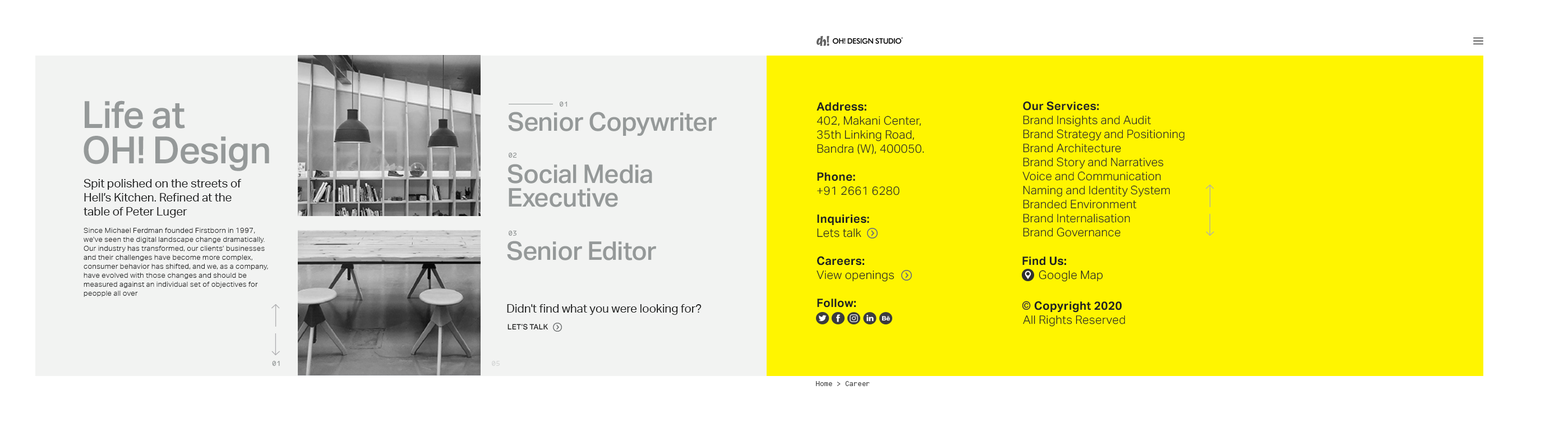
<style>
.page{position:relative;width:1568px;height:431px;background:#ffffff}
.page>*{position:absolute;margin:0}
.t1{font:37.4px/35.1px "AktivGroteskW06-Medium";letter-spacing:-0.02em;color:#959999}
.t2{font:7.5px "CodeSaver-Regular";letter-spacing:0.015em;color:#959999}
.t3{font:11.7px/14px "AktivGroteskW06-Light";letter-spacing:0.01em;color:#252626}
.t4{font:11.7px/14px "AktivGroteskW06-Bold";letter-spacing:0.01em;color:#252626}
.t5{font:25.7px "AktivGroteskW06-Medium";letter-spacing:-0.02em;color:#959999}
.t6{font:11.7px/14px "AktivGroteskW06-Light";letter-spacing:0.015em;color:#202222}
.t7{font:11.7px/14px "AktivGroteskW06-Bold";letter-spacing:0.015em;color:#202222}
.t8{font:25.7px/23.4px "AktivGroteskW06-Medium";letter-spacing:-0.02em;color:#959999}
.t9{font:11.7px "AktivGroteskW06-Regular";letter-spacing:-0.005em;color:#212222}
.t10{font:7.5px "AktivGroteskW06-Light";letter-spacing:0.015em;color:#212222}
.t11{font:11.7px/14px "AktivGroteskW06-Medium";letter-spacing:0.015em;color:#202222}
.t12{font:7.5px "AktivGroteskW06-Medium";letter-spacing:0.015em;color:#212222;text-transform:uppercase}
.t13{font:7.5px "CodeSaver-Regular";letter-spacing:0.015em;color:#d4d6d6}
.t14{font:7.5px "CodeSaver-Regular";color:#4d4d4d}
</style>
<div class="page">
<p class="t1" style="left:84px;top:100px;width:185px;height:71px">Life at<br>OH! Design</p>
<p class="t2" style="left:560px;top:102px;width:7px;height:5px">01</p>
<p class="t3" style="left:1022px;top:101px;width:162px;height:136px"><span class="t4">Our Services:<br></span>Brand Insights and Audit<br>Brand Strategy and Positioning<br>Brand Architecture<br>Brand Story and Narratives<br>Voice and Communication<br>Naming and Identity System<br>Branded Environment<br>Brand Internalisation<br>Brand Governance</p>
<p class="t5" style="left:508px;top:112px;width:209px;height:24px">Senior Copywriter</p>
<p class="t6" style="left:817px;top:102px;width:107px;height:205px"><span class="t7">Address:<br></span>402, Makani Center,<br>35th Linking Road,<br>Bandra (W), 400050.<br><br><span class="t7">Phone:<br></span>+91 2661 6280<br><br><span class="t7">Inquiries: <br></span>Lets talk<br><br><span class="t7">Careers:<br></span>View openings<br><br><span class="t7">Follow:</span></p>
<p class="t2" style="left:509px;top:153px;width:7px;height:5px">02</p>
<p class="t8" style="left:508px;top:164px;width:144px;height:43px">Social Media<br>Executive</p>
<p class="t9" style="left:84px;top:179px;width:158px;height:39px">Spit polished on the streets of Hell’s Kitchen. Refined at the table of Peter Luger</p>
<p class="t10" style="left:84px;top:228px;width:184px;height:69px">Since Michael Ferdman founded Firstborn in 1997, we’ve seen the digital landscape change dramatically. Our industry has transformed, our clients’ businesses and their challenges have become more complex, consumer behavior has shifted, and we, as a company, have evolved with those changes and should be measured against an individual set of objectives for peopple all over</p>
<p class="t2" style="left:509px;top:230px;width:7px;height:6px">03</p>
<p class="t5" style="left:507px;top:241px;width:149px;height:19px">Senior Editor</p>
<p class="t6" style="left:1022px;top:256px;width:81px;height:26px"><span class="t7">Find Us: <br></span>      Google Map</p>
<p class="t9" style="left:507px;top:304px;width:195px;height:11px">Didn't find what you were looking for?</p>
<p class="t6" style="left:1023px;top:301px;width:102px;height:25px"><span class="t11">    </span><span class="t7">Copyright 2020<br></span>All Rights Reserved</p>
<p class="t12" style="left:508px;top:324px;width:40px;height:6px">LET’S TALK</p>
<p class="t2" style="left:272px;top:361px;width:8px;height:5px">01</p>
<p class="t13" style="left:492px;top:361px;width:8px;height:5px">05</p>
<p class="t14" style="left:816px;top:381px;width:54px;height:5px">Home &gt; Career</p>
</div>
